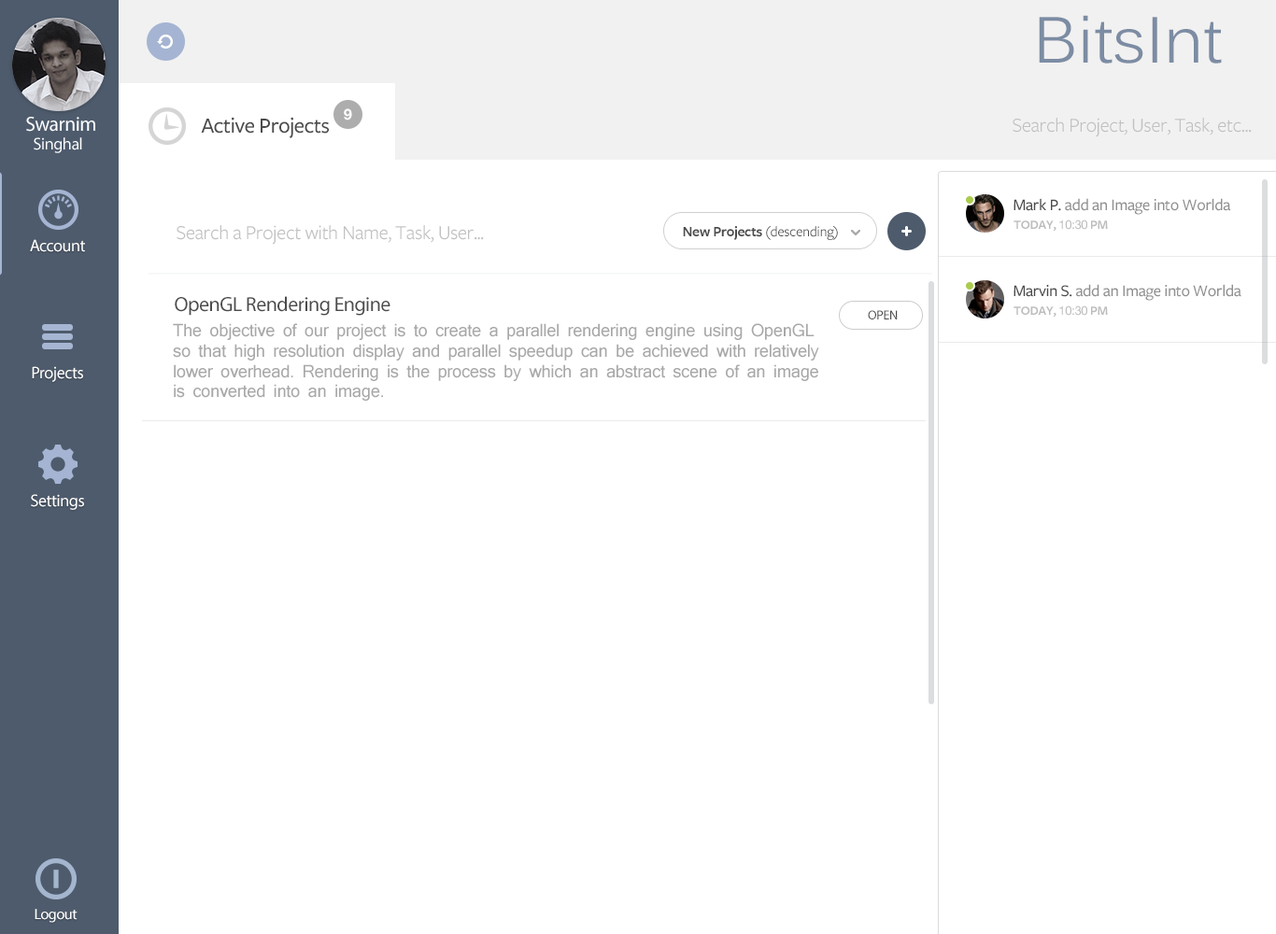
<style>
.page{position:relative;width:1276px;height:934px;background:#ffffff}
.page>*{position:absolute;margin:0}
.t1{font:64.2px "Kalinga";letter-spacing:0.005em;color:#7c8ca3}
.t2{font:14.9px "HelveticaNeue-Bold";letter-spacing:-0.025em;color:#ffffff}
.t3{font:22.4px "FreightSansProMedium-Regular";letter-spacing:-0.025em;color:#4b4b4b}
.t4{font:20.6px "FreightSansProBook-Regular";letter-spacing:-0.025em;color:#c1c1c1}
.t5{font:16.8px "FreightSansProMedium-Regular";letter-spacing:-0.025em;color:#909090}
.t6{font:16.8px "FreightSansProMedium-Regular";letter-spacing:-0.025em;color:#4b4b4b}
.t7{font:13.1px "FreightSansProSemibold-Regular";letter-spacing:-0.025em;color:#bdbdbd;text-transform:uppercase}
.t8{font:12.1px "HelveticaNeue";letter-spacing:-0.025em;color:#bdbdbd;text-transform:uppercase}
.t9{font:14.9px "FreightSansProSemibold-Regular";letter-spacing:-0.025em;color:#4b4b4b}
.t10{font:14.9px "FreightSansProBook-Regular";letter-spacing:-0.025em;color:#4b4b4b}
.t11{font:16.8px "MyriadPro-Regular";letter-spacing:-0.025em;color:#ffffff}
.t12{font:20.6px "MyriadPro-Regular";letter-spacing:-0.025em;color:#4b4b4b}
.t13{font:13.1px "MyriadPro-Regular";letter-spacing:-0.025em;color:#4b4b4b;text-transform:uppercase}
.t14{font:16.8px "Mangal";letter-spacing:-0.025em;color:#a8a8a8}
.t15{font:14.9px "MyriadPro-Regular";letter-spacing:-0.025em;color:#ffffff}
</style>
<div class="page">
<p class="t1" style="left:1039px;top:15px;width:183px;height:49px">BitsInt</p>
<p class="t2" style="left:344px;top:108px;width:8px;height:13px">9</p>
<p class="t3" style="left:201px;top:117px;width:128px;height:21px">Active Projects</p>
<p class="t4" style="left:1013px;top:118px;width:239px;height:19px">Search Project, User, Task, etc...</p>
<p class="t5" style="left:1014px;top:198px;width:216px;height:17px"><span class="t6">Mark P. </span>add an Image into Worlda</p>
<p class="t7" style="left:1014px;top:220px;width:94px;height:12px">Today, <span class="t8">10:30</span> PM</p>
<p class="t4" style="left:177px;top:225px;width:307px;height:20px">Search a Project with Name, Task, User...</p>
<p class="t9" style="left:683px;top:226px;width:155px;height:14px">New Projects <span class="t10">(descending)</span></p>
<p class="t11" style="left:30px;top:239px;width:55px;height:13px">Account</p>
<p class="t5" style="left:1014px;top:284px;width:228px;height:17px"><span class="t6">Marvin S. </span>add an Image into Worlda</p>
<p class="t12" style="left:175px;top:296px;width:216px;height:20px">OpenGL Rendering Engine</p>
<p class="t7" style="left:1014px;top:306px;width:94px;height:12px">Today, <span class="t8">10:30</span> PM</p>
<p class="t13" style="left:868px;top:310px;width:30px;height:10px">Open</p>
<p class="t14" style="left:173px;top:323px;width:646px;height:78px">The objective of our project is to create a parallel rendering engine using OpenGL so that high resolution display and parallel speedup can be achieved with relatively lower overhead. Rendering is the process by which an abstract scene of an image is converted into an image.</p>
<p class="t11" style="left:32px;top:366px;width:51px;height:16px">Projects</p>
<p class="t11" style="left:31px;top:494px;width:53px;height:16px">Settings</p>
<p class="t15" style="left:35px;top:909px;width:43px;height:14px">Logout</p>
</div>
